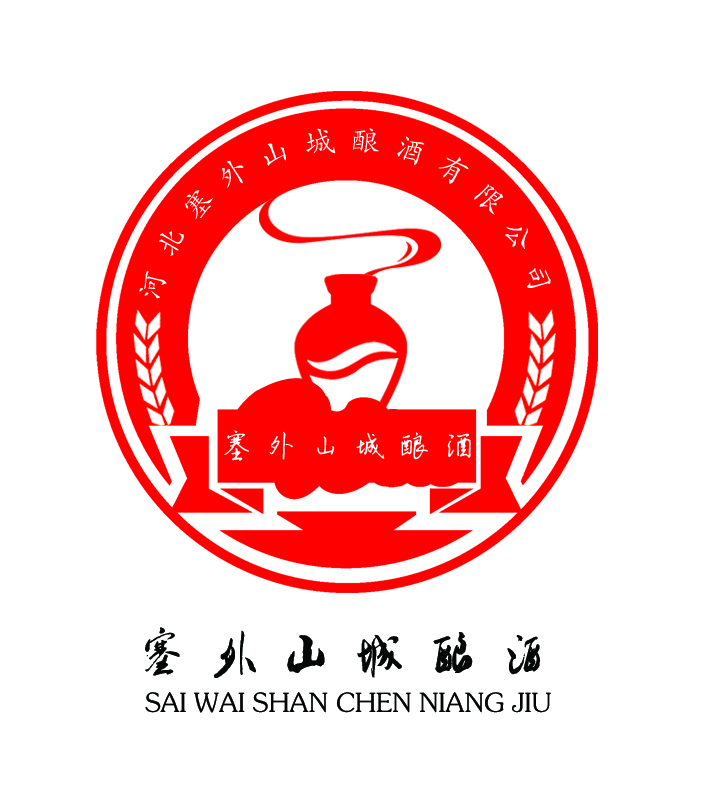
<style>
.page{position:relative;width:714px;height:810px;background:#ffffff}
.page>*{position:absolute;margin:0}
.t1{font:30.6px "ÊéÌå·»ÕÔ¾Å½­¸Ö±ÊÐÐÊé";letter-spacing:0.455em;color:#ffffff}
.t2{font:49.7px "ÊéÌå·»Ã×ÜÀÌå";letter-spacing:0.455em;color:#050707}
.t3{font:26.4px "ÊéÌå·»ÕÔ¾Å½­¸Ö±Ê¿¬Êé";color:#040606}
</style>
<div class="page">
<p class="t1" style="left:224px;top:430px;width:247px;height:31px">塞外山城酿酒</p>
<p class="t2" style="left:145px;top:627px;width:395px;height:51px">塞外山城酿酒</p>
<p class="t3" style="left:145px;top:692px;width:406px;height:21px">SAI WAI SHAN CHEN NIANG JIU</p>
</div>
